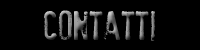
<style>
.page{position:relative;width:200px;height:50px;background:#000000}
.page>*{position:absolute;margin:0}
.t1{font:36px "StamPete"}
</style>
<div class="page">
<p class="t1" style="left:44px;top:10px;width:112px;height:31px">contatti</p>
</div>
